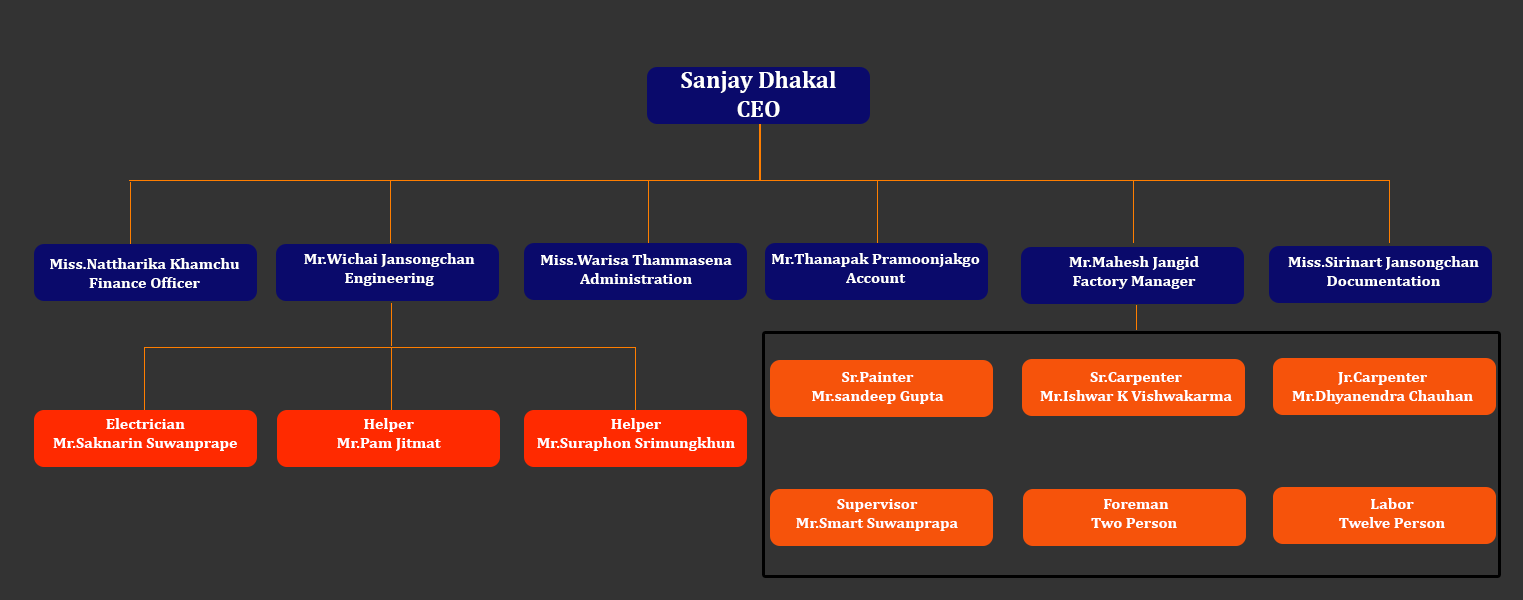
<style>
.page{position:relative;width:1523px;height:600px;background:#333333}
.page>*{position:absolute;margin:0}
.t1{font:24px "Cambria-Bold";color:#ffffff}
.t2{font:16px "Cambria-Bold";color:#ffffff}
</style>
<div class="page">
<p class="t1" style="left:681px;top:71px;width:155px;height:46px;text-align:center">Sanjay Dhakal<br>CEO</p>
<p class="t2" style="left:304px;top:253px;width:171px;height:33px;text-align:center">Mr.Wichai Jansongchan<br>Engineering</p>
<p class="t2" style="left:541px;top:254px;width:191px;height:30px;text-align:center">Miss.Warisa Thammasena<br>Administration</p>
<p class="t2" style="left:772px;top:253px;width:208px;height:30px;text-align:center">Mr.Thanapak Pramoonjakgo<br>Account</p>
<p class="t2" style="left:1069px;top:256px;width:130px;height:33px;text-align:center">Mr.Mahesh Jangid<br>Factory Manager</p>
<p class="t2" style="left:1288px;top:256px;width:191px;height:30px;text-align:center">Miss.Sirinart Jansongchan<br>Documentation</p>
<p class="t2" style="left:50px;top:258px;width:190px;height:30px;text-align:center">Miss.Nattharika Khamchu<br>Finance Officer</p>
<p class="t2" style="left:812px;top:372px;width:132px;height:32px;text-align:center">Sr.Painter<br>Mr.sandeep Gupta</p>
<p class="t2" style="left:1040px;top:372px;width:192px;height:29px;text-align:center">Sr.Carpenter<br>Mr.Ishwar K Vishwakarma</p>
<p class="t2" style="left:1292px;top:372px;width:181px;height:32px;text-align:center">Jr.Carpenter<br>Mr.Dhyanendra Chauhan</p>
<p class="t2" style="left:53px;top:418px;width:184px;height:33px;text-align:center">Electrician<br>Mr.Saknarin Suwanprape</p>
<p class="t2" style="left:337px;top:418px;width:104px;height:33px;text-align:center">Helper<br>Mr.Pam Jitmat</p>
<p class="t2" style="left:537px;top:418px;width:198px;height:33px;text-align:center">Helper<br>Mr.Suraphon Srimungkhun</p>
<p class="t2" style="left:796px;top:499px;width:162px;height:32px;text-align:center">Supervisor<br>Mr.Smart Suwanprapa</p>
<p class="t2" style="left:1091px;top:499px;width:86px;height:29px;text-align:center">Foreman<br> Two Person</p>
<p class="t2" style="left:1339px;top:498px;width:106px;height:30px;text-align:center">Labor<br>Twelve Person</p>
</div>
